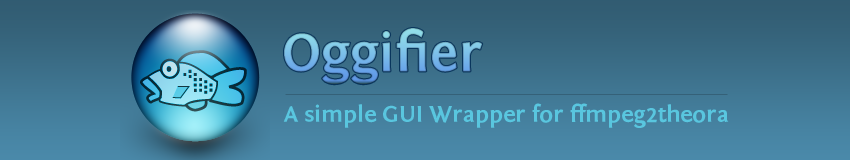
<style>
.page{position:relative;width:850px;height:160px}
.page>*{position:absolute;margin:0}
.t1{font:56px "FontinSans-Bold";color:#59c7e0}
.t2{font:24px "FontinSans-Bold";color:#59c7e0}
</style>
<div class="page">
<p class="t1" style="left:284px;top:28px;width:199px;height:57px">Oggifier</p>
<p class="t2" style="left:283px;top:103px;width:446px;height:25px">A simple GUI Wrapper for ffmpeg2theora</p>
</div>
